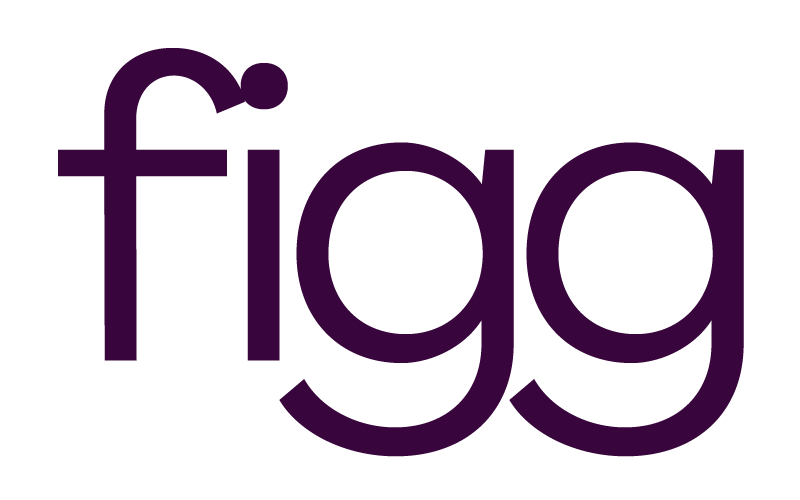
<style>
.page{position:relative;width:800px;height:500px;background:#ffffff}
.page>*{position:absolute;margin:0}
.t1{font:416.7px "Agrandir-Regular";letter-spacing:-0.05em;color:#38063c}
</style>
<div class="page">
<p class="t1" style="left:58px;top:48px;width:686px;height:409px">figg</p>
</div>
